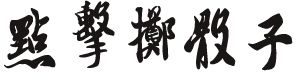
<style>
.page{position:relative;width:300px;height:80px;background:#ffffff}
.page>*{position:absolute;margin:0}
.t1{font:70.7px "SCFwxz";color:#1b1616;font-weight:bold;scale:0.83 1}
</style>
<div class="page">
<p class="t1" style="left:4px;top:0px;width:289px;height:71px">點擊擲骰子</p>
</div>
